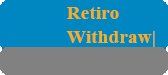
<style>
.page{position:relative;width:168px;height:75px;background:#0087c2}
.page>*{position:absolute;margin:0}
.t1{font:19.4px "TimesNewRomanPS-BoldMT";color:#fcad18}
</style>
<div class="page">
<p class="t1" style="left:66px;top:7px;width:89px;height:40px">Retiro<br>Withdraw|</p>
</div>
